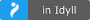
<style>
.page{position:relative;width:90px;height:20px;background:#5c5c5c}
.page>*{position:absolute;margin:0}
.t1{font:10px "Verdana";color:#ffffff}
</style>
<div class="page">
<p class="t1" style="left:42px;top:6px;width:34px;height:10px">in Idyll</p>
</div>
